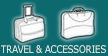
<style>
.page{position:relative;width:108px;height:56px;background:#0c696e}
.page>*{position:absolute;margin:0}
.t1{font:10.3px "Verdana";color:#fdfef9;scale:0.82 1}
</style>
<div class="page">
<p class="t1" style="left:1px;top:45px;width:105px;height:8px">TRAVEL &amp; ACCESSORIES</p>
</div>
